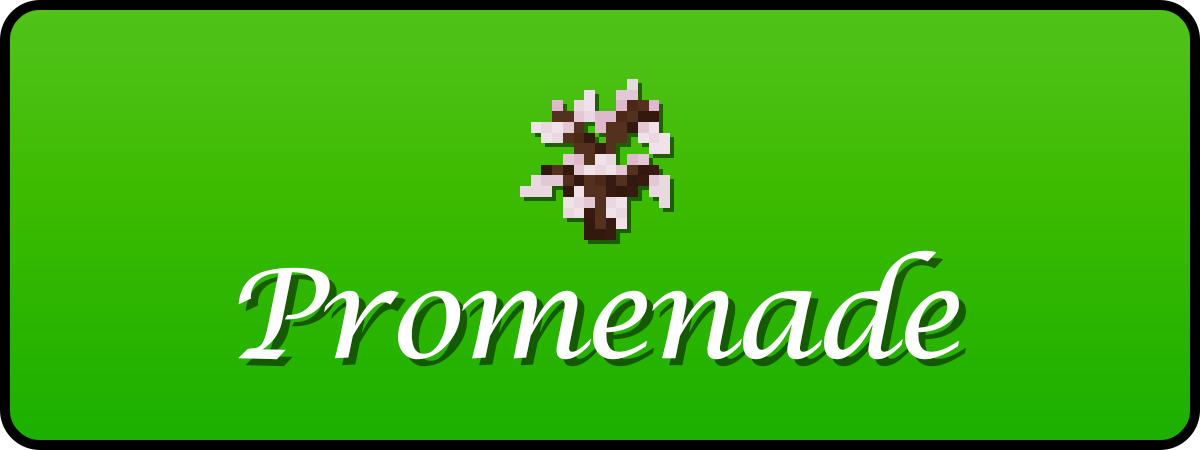
<style>
.page{position:relative;width:1200px;height:450px}
.page>*{position:absolute;margin:0}
.t1{font:124.9px "LucidaCalligraphy-Italic";letter-spacing:-0.05em;color:#ffffff;font-weight:bold}
</style>
<div class="page">
<p class="t1" style="left:238px;top:250px;width:721px;height:110px">Promenade</p>
</div>
